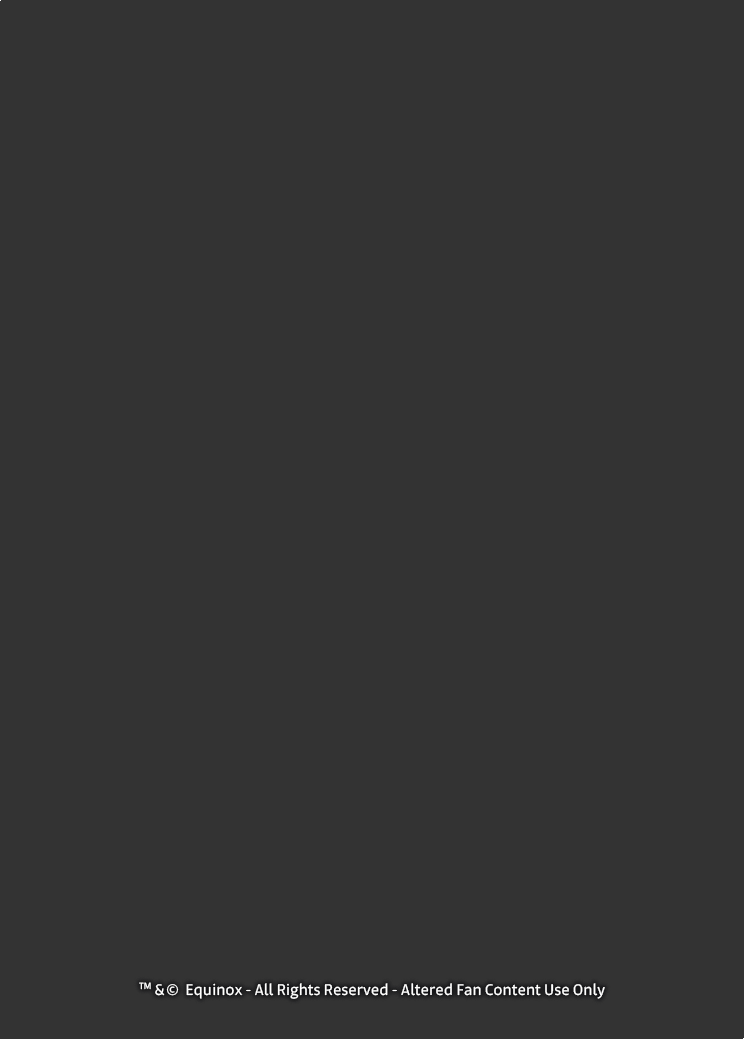
<style>
.page{position:relative;width:744px;height:1039px;background:#333333}
.page>*{position:absolute;margin:0}
.t1{font:17px "JaliGreekVariable-Regular";color:#ffffff}
</style>
<div class="page">
<p class="t1" style="left:139px;top:982px;width:466px;height:17px">TM &amp; ©  Equinox - All Rights Reserved - Altered Fan Content Use Only</p>
</div>
